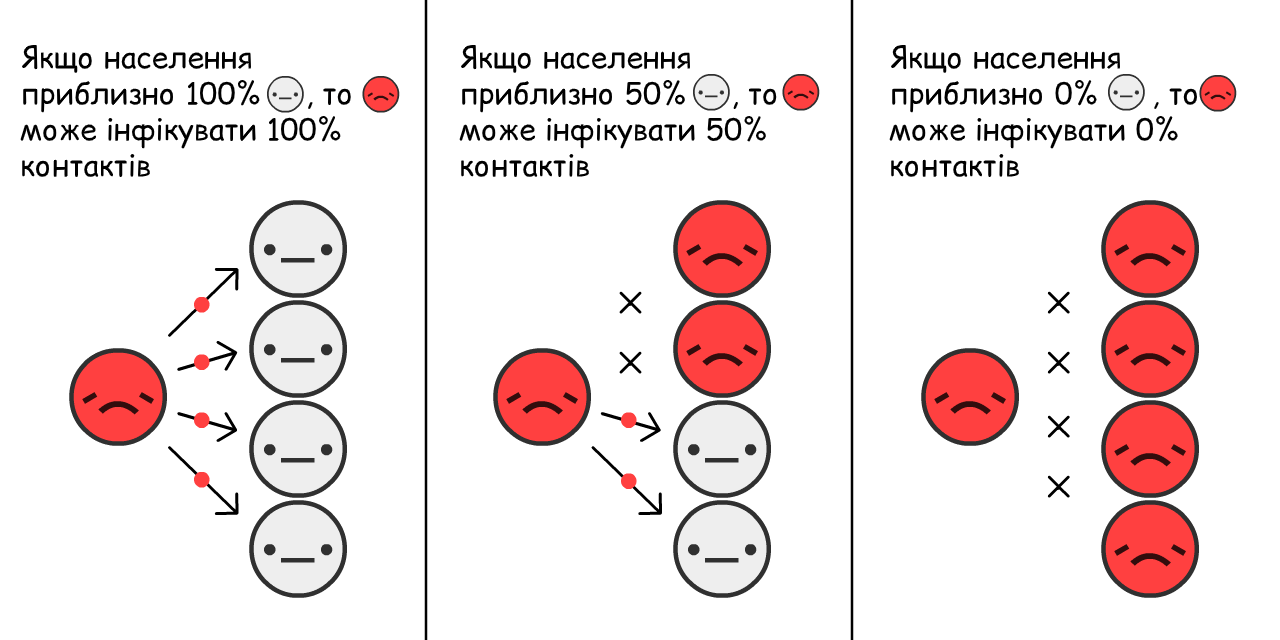
<style>
.page{position:relative;width:1280px;height:640px;background:#ffffff}
.page>*{position:absolute;margin:0}
.t1{font:30px "ComicRelief";color:#000000}
</style>
<div class="page">
<p class="t1" style="left:20px;top:44px;width:331px;height:134px">Якщо населення<br>приблизно 100%     , то<br>може інфікувати 100%<br>контактів</p>
<p class="t1" style="left:459px;top:44px;width:318px;height:134px">Якщо населення<br>приблизно 50%     , то<br>може інфікувати 50%<br>контактів</p>
<p class="t1" style="left:889px;top:44px;width:308px;height:134px">Якщо населення<br>приблизно 0%      , то<br>може інфікувати 0%<br>контактів</p>
</div>
